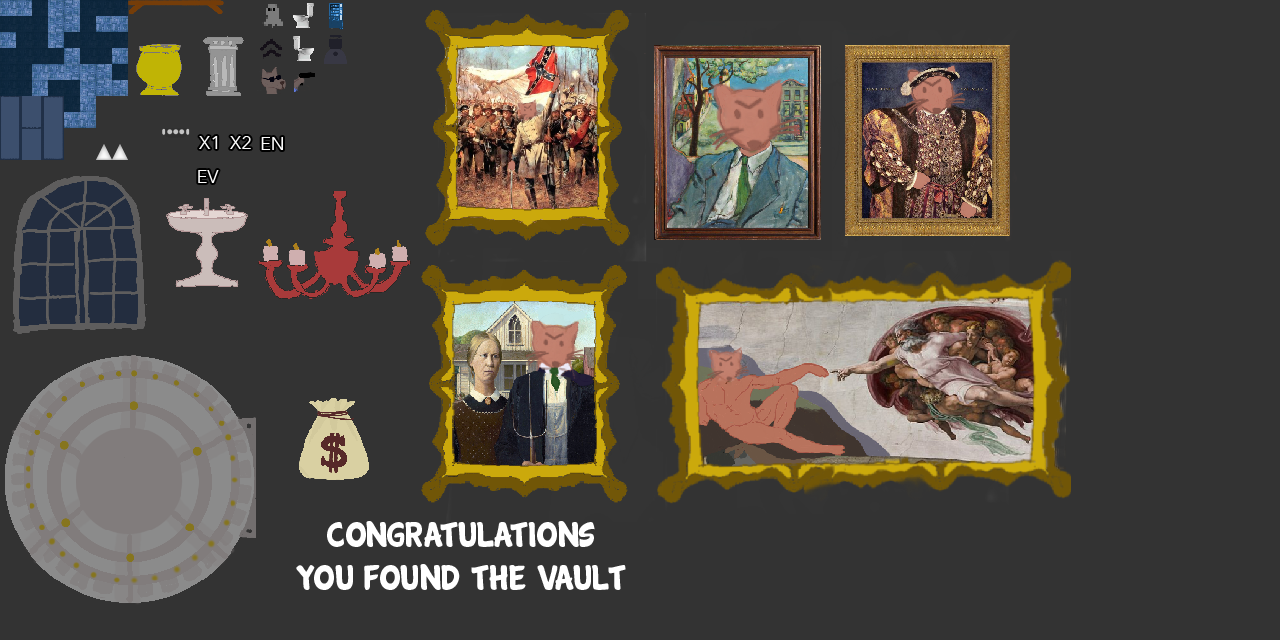
<style>
.page{position:relative;width:1280px;height:640px;background:#333333}
.page>*{position:absolute;margin:0}
.t1{font:18px "AvenirNext-Regular";color:#fafafa}
.t2{font:36px "Cartwheel";color:#ffffff}
</style>
<div class="page">
<p class="t1" style="left:199px;top:136px;width:19px;height:13px">X1</p>
<p class="t1" style="left:230px;top:136px;width:21px;height:13px">X2</p>
<p class="t1" style="left:261px;top:137px;width:22px;height:13px">EN</p>
<p class="t1" style="left:198px;top:170px;width:21px;height:13px">EV</p>
<p class="t2" style="left:296px;top:521px;width:330px;height:69px;text-align:center">CONGRATULATIONS <br>YOU FOUND THE VAULT</p>
</div>
